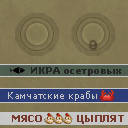
<style>
.page{position:relative;width:128px;height:128px}
.page>*{position:absolute;margin:0}
.t1{font:9px "Tahoma-Bold";letter-spacing:0.1em;color:#262626}
.t2{font:9px "Tahoma";letter-spacing:0.1em;color:#c7c7c7}
.t3{font:9px "Tahoma-Bold";letter-spacing:0.1em;color:#75382b}
</style>
<div class="page">
<p class="t1" style="left:31px;top:67px;width:90px;height:9px">ИКРА осетровых</p>
<p class="t2" style="left:8px;top:91px;width:89px;height:10px">Камчатские крабы</p>
<p class="t3" style="left:12px;top:115px;width:30px;height:7px">МЯСО</p>
<p class="t3" style="left:77px;top:115px;width:47px;height:9px">ЦЫПЛЯТ</p>
</div>
